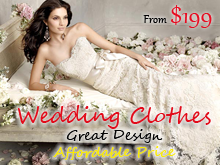
<style>
.page{position:relative;width:220px;height:165px}
.page>*{position:absolute;margin:0}
.t1{font:14px "Gabriola";color:#000000}
.t2{font:30px "Gabriola";color:#e70b20}
.t3{font:14px "SegoeScript";color:#f9ea00}
.t4{font:22px "SegoeScript";color:#e10b1a}
.t5{font:14px "SegoeScript";color:#040404}
</style>
<div class="page">
<p class="t1" style="left:143px;top:5px;width:69px;height:23px">From <span class="t2">$199</span></p>
<p class="t3" style="left:18px;top:105px;width:193px;height:55px;text-align:center"><span class="t4">Wedding Clothes<br></span><span class="t5">Great Design<br></span>Affordable Price</p>
</div>
